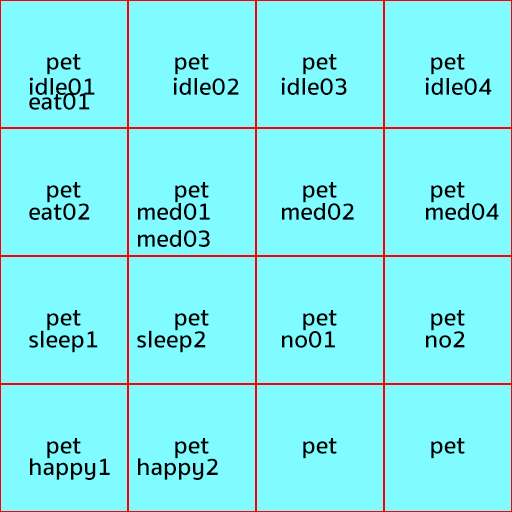
<style>
.page{position:relative;width:512px;height:512px;background:#80fbff}
.page>*{position:absolute;margin:0}
.t1{font:24.9px/2.5px "SukhumvitSet-SemiBold";color:#000000}
</style>
<div class="page">
<p class="t1" style="left:29px;top:77px;width:470px;height:403px">idle01   idle02  idle03   idle04<br><br><br><br><br><br>eat01<br><br><br><br><br><br><br><br><br><br><br><br><br><br><br><br><br><br><br><br><br><br><br><br><br><br><br><br><br><br><br><br><br><br><br><br><br><br><br><br><br><br><br> <br><br>eat02    med01  med02  med04<br><br><br><br><br><br><br><br><br><br><br>   med03        <br><br><br><br><br><br><br><br><br><br><br><br><br><br><br><br><br><br><br><br><br><br><br><br><br><br><br><br><br><br><br><br><br><br><br><br><br><br><br><br><br>sleep1  sleep2   no01   no2<br><br><br><br><br><br><br><br><br><br><br><br><br><br><br><br><br><br><br><br><br><br><br><br><br><br><br><br><br><br><br><br><br><br><br><br><br><br><br><br><br><br><br><br><br><br><br><br><br><br><br><br>happy1 happy2</p>
</div>
